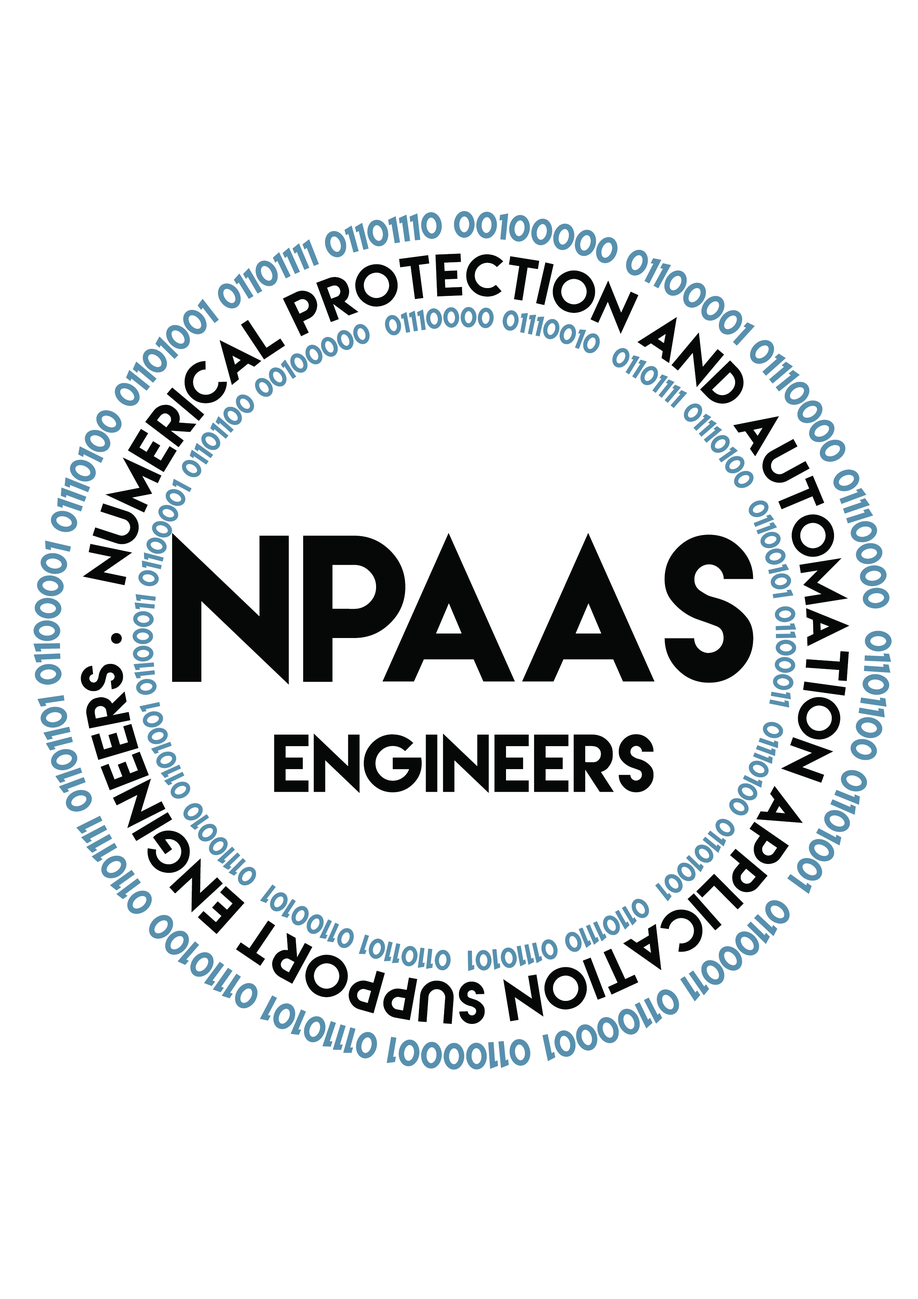
<style>
.page{position:relative;width:918px;height:1299px;background:#ffffff}
.page>*{position:absolute;margin:0}
.t1{font:53.1px "LemonMilk";color:#060707}
.t2{font:185.7px "LemonMilk";color:#060707}
.t3{font:72.8px "LemonMilk";color:#060707}
</style>
<div class="page">
<p class="t1" style="left:81px;top:253px;width:769px;height:771px;text-align:right;rotate:-121deg">Numerical Protection and Automation Application Support Engineers .<br>Application</p>
<p class="t2" style="left:172px;top:533px;width:581px;height:152px">NPAAS</p>
<p class="t3" style="left:274px;top:733px;width:380px;height:60px">ENGINEERS</p>
</div>
